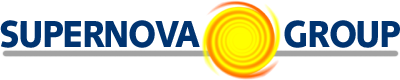
<style>
.page{position:relative;width:400px;height:80px;background:#ffffff}
.page>*{position:absolute;margin:0}
.t1{font:37.5px "Syntax-Black";letter-spacing:-0.04em;color:#003471;scale:0.9 1}
</style>
<div class="page">
<p class="t1" style="left:0px;top:20px;width:200px;height:28px">SUPERNOVA</p>
<p class="t1" style="left:284px;top:20px;width:116px;height:28px">GROUP</p>
</div>
